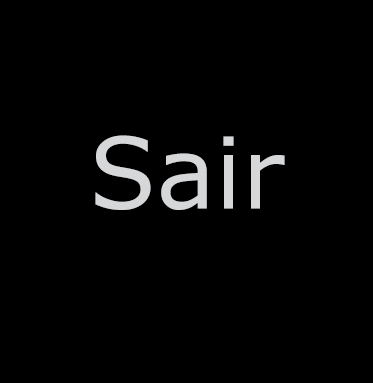
<style>
.page{position:relative;width:373px;height:383px;background:#000000}
.page>*{position:absolute;margin:0}
.t1{font:98.1px "Verdana";color:#d5d7d8}
</style>
<div class="page">
<p class="t1" style="left:95px;top:135px;width:190px;height:75px">Sair</p>
</div>
